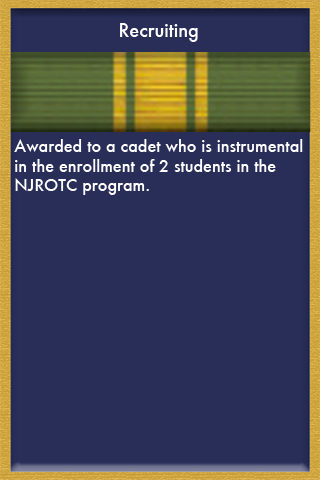
<style>
.page{position:relative;width:320px;height:480px;background:#292e59}
.page>*{position:absolute;margin:0}
.t1{font:18px "Futura-Medium";color:#ffffff}
.t2{font:16px "Futura-Medium";color:#ffffff}
</style>
<div class="page">
<p class="t1" style="left:120px;top:23px;width:78px;height:19px">Recruiting</p>
<p class="t2" style="left:14px;top:139px;width:289px;height:56px">Awarded to a cadet who is instrumental <br>in the enrollment of 2 students in the <br>NJROTC program.</p>
</div>
